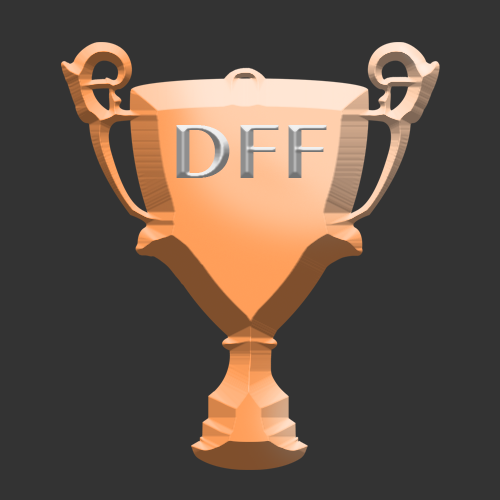
<style>
.page{position:relative;width:500px;height:500px;background:#333333}
.page>*{position:absolute;margin:0}
.t1{font:66.8px "BanglaMN-Bold"}
</style>
<div class="page">
<p class="t1" style="left:176px;top:125px;width:151px;height:53px">DFF</p>
</div>
